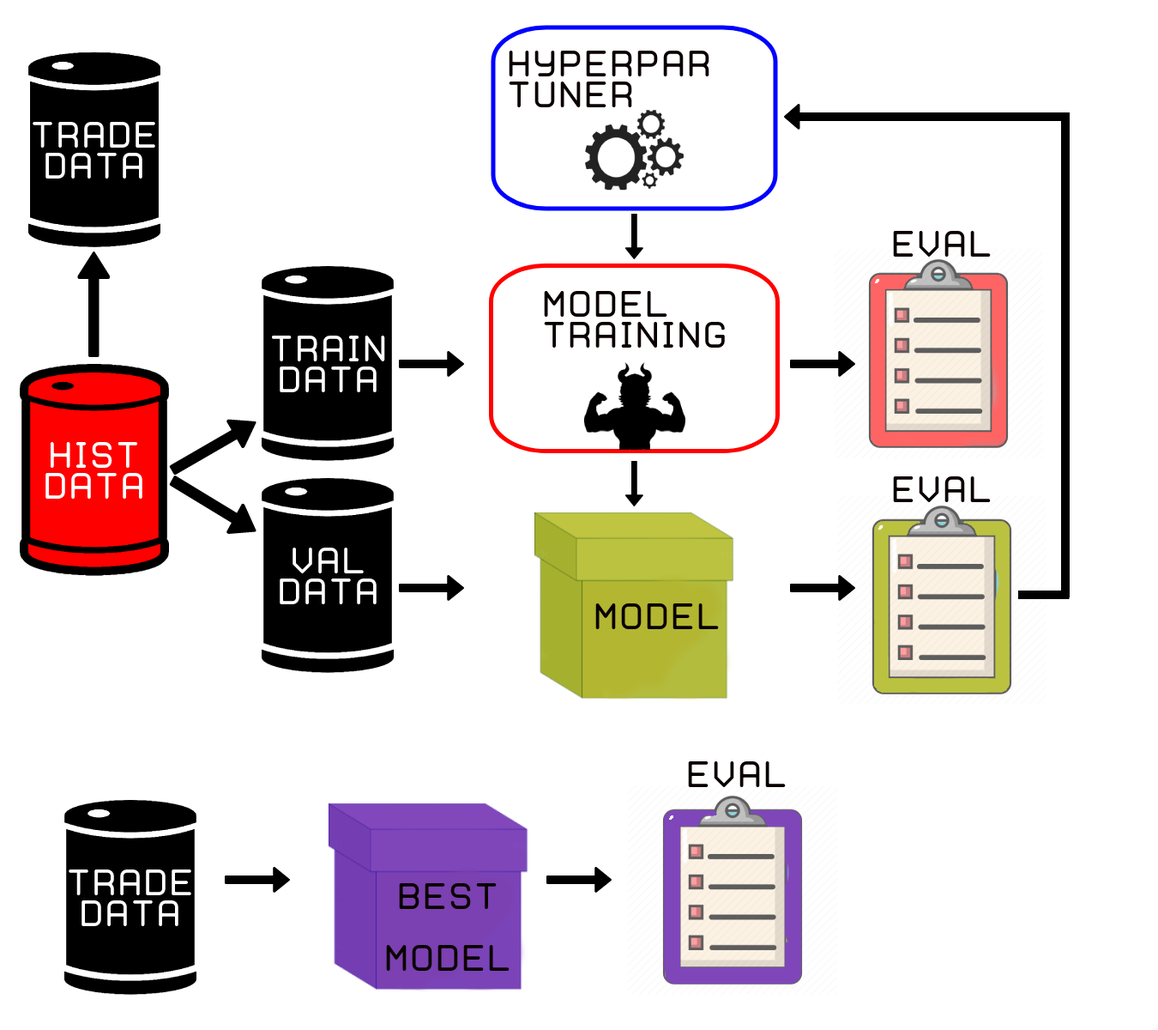
<style>
.page{position:relative;width:1158px;height:1030px;background:#ffffff}
.page>*{position:absolute;margin:0}
.t1{font:25.7px "WebHostingHub-Glyphs";color:#0a0000}
.t2{font:25.7px "WebHostingHub-Glyphs";color:#ffffff}
</style>
<div class="page">
<p class="t1" style="left:509px;top:51px;width:201px;height:56px">Hyperpar.<br>Tuner</p>
<p class="t2" style="left:33px;top:122px;width:122px;height:56px;text-align:center">TRADe<br>data</p>
<p class="t2" style="left:33px;top:122px;width:122px;height:56px;text-align:center">TRADe<br>data</p>
<p class="t1" style="left:893px;top:231px;width:98px;height:26px">Eval.</p>
<p class="t1" style="left:544px;top:291px;width:181px;height:56px">Model<br>Training</p>
<p class="t2" style="left:271px;top:335px;width:114px;height:57px;text-align:center">Train<br>DATA</p>
<p class="t2" style="left:45px;top:442px;width:97px;height:56px;text-align:center">HISt<br>Data</p>
<p class="t1" style="left:893px;top:476px;width:98px;height:26px">Eval.</p>
<p class="t2" style="left:280px;top:547px;width:97px;height:57px;text-align:center">Val<br>DATA</p>
<p class="t1" style="left:595px;top:603px;width:124px;height:27px">Model</p>
<p class="t1" style="left:688px;top:761px;width:98px;height:26px">Eval.</p>
<p class="t2" style="left:69px;top:869px;width:122px;height:57px;text-align:center">TRADe<br>data</p>
<p class="t1" style="left:386px;top:883px;width:124px;height:87px;text-align:center">Best<br><br>Model</p>
</div>
